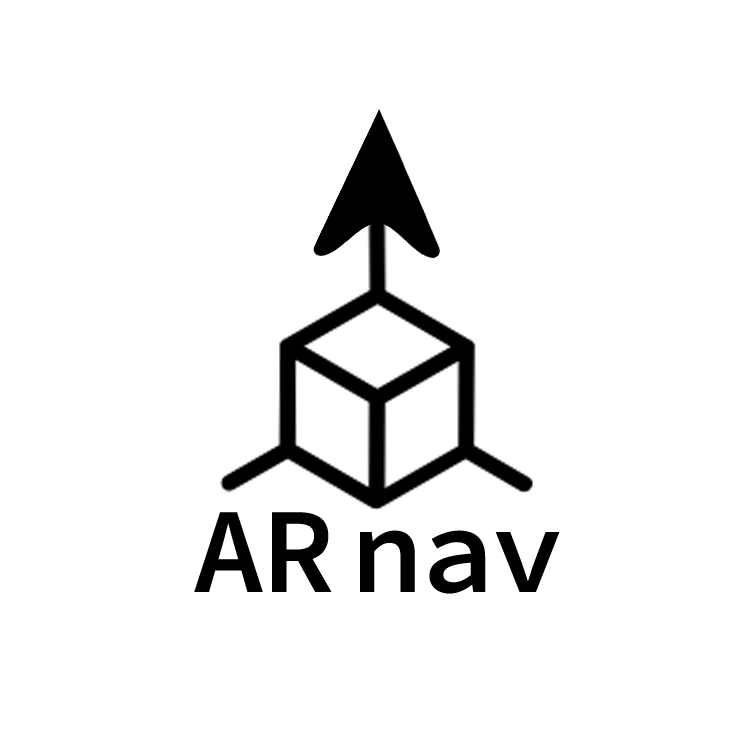
<style>
.page{position:relative;width:750px;height:750px;background:#ffffff}
.page>*{position:absolute;margin:0}
.t1{font:121.8px "SourceCodeRoman-Semibold";letter-spacing:-0.02em;color:#000000;font-weight:bold}
.t2{font:121.8px "SourceCodeRoman-Semibold";letter-spacing:0.12em;color:#000000;font-weight:bold}
</style>
<div class="page">
<p class="t1" style="left:194px;top:512px;width:366px;height:82px">A<span class="t2">R</span>nav</p>
</div>
